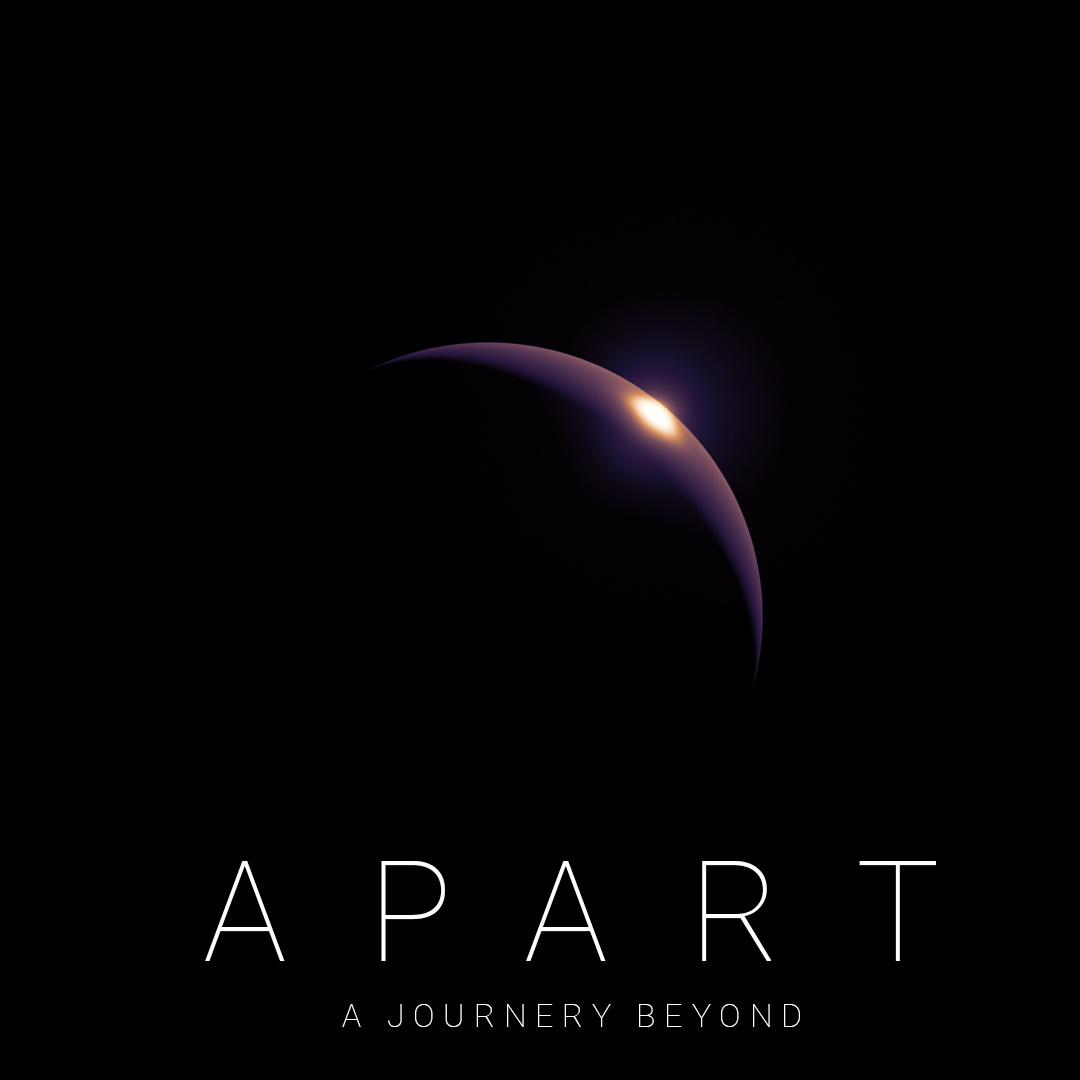
<style>
.page{position:relative;width:1080px;height:1080px;background:#000000}
.page>*{position:absolute;margin:0}
.t1{font:140px "Roboto-Thin";letter-spacing:0.58em;color:#ffffff}
.t2{font:32px "Roboto-Thin";letter-spacing:0.28em;color:#ffffff}
</style>
<div class="page">
<p class="t1" style="left:205px;top:861px;width:731px;height:100px">APART</p>
<p class="t2" style="left:342px;top:1004px;width:458px;height:23px">A JOURNERY BEYOND</p>
</div>
